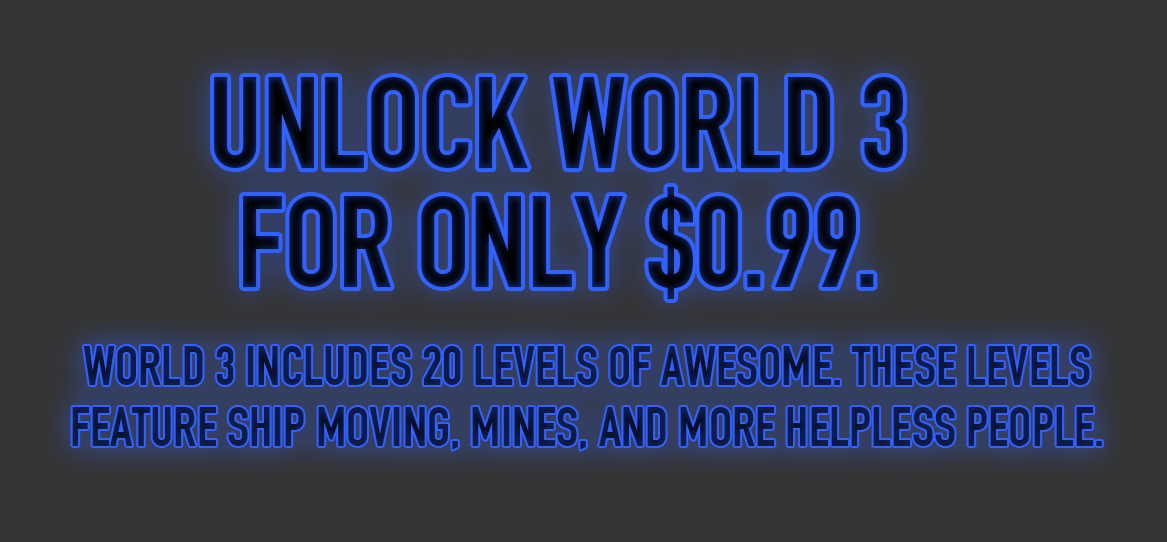
<style>
.page{position:relative;width:1167px;height:542px;background:#333333}
.page>*{position:absolute;margin:0}
.t1{font:127.5px/118.8px "DINEngschrift";color:#060c20;text-transform:uppercase}
.t2{font:54.5px/60.5px "DINEngschrift";color:#0e1c4a;text-transform:uppercase}
</style>
<div class="page">
<p class="t1" style="left:214px;top:76px;width:690px;height:223px;text-align:center">unlock world 3 <br>for only $0.99.</p>
<p class="t2" style="left:72px;top:346px;width:1030px;height:104px;text-align:center">World 3 includes 20 levels of awesome. These levels <br>feature ship moving, mines, and more helpless people.</p>
</div>
